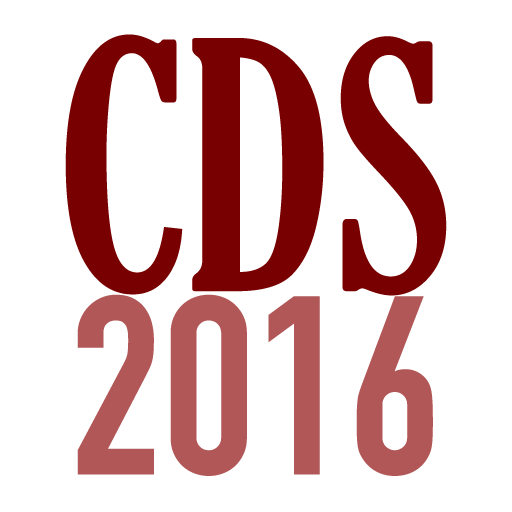
<style>
.page{position:relative;width:512px;height:512px;background:#ffffff}
.page>*{position:absolute;margin:0}
.t1{font:333.3px "GloucesterMT-ExtraCondensed";color:#780000}
.t2{font:250px "DINCondensed-Bold";color:#b15757}
</style>
<div class="page">
<p class="t1" style="left:65px;top:34px;width:382px;height:262px">CDS</p>
<p class="t2" style="left:77px;top:294px;width:356px;height:182px">2016</p>
</div>
